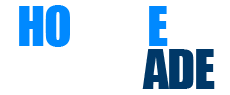
<style>
.page{position:relative;width:230px;height:95px;background:#ffffff}
.page>*{position:absolute;margin:0}
.t1{font:50.7px "Impact";letter-spacing:-0.025em;color:#0089ff}
.t2{font:50.7px "Impact";letter-spacing:-0.025em;color:#003868}
.t3{font:50.7px "Impact";letter-spacing:-0.025em;color:#ffffff}
</style>
<div class="page">
<p class="t1" style="left:19px;top:5px;width:149px;height:42px">HO          E</p>
<p class="t2" style="left:142px;top:49px;width:73px;height:40px"><span class="t3">     </span>ADE</p>
</div>
